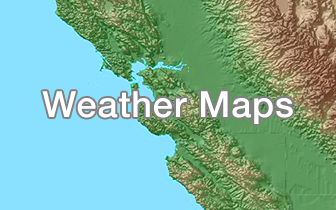
<style>
.page{position:relative;width:336px;height:210px;background:#8ae1ff}
.page>*{position:absolute;margin:0}
.t1{font:36px "HelveticaNeue-Medium";letter-spacing:0.025em;color:#ffffff}
</style>
<div class="page">
<p class="t1" style="left:42px;top:91px;width:251px;height:33px">Weather Maps</p>
</div>
